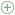
<style>
.page{position:relative;width:15px;height:15px;background:#ffffff}
.page>*{position:absolute;margin:0}
.t1{font:16px "BodoniXT";letter-spacing:-0.02em;color:#77b077}
</style>
<div class="page">
<p class="t1" style="left:3px;top:3px;width:8px;height:8px">+</p>
</div>
